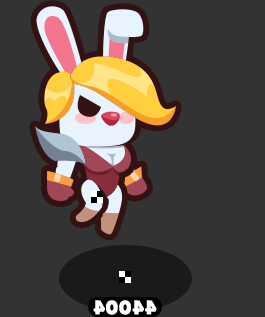
<style>
.page{position:relative;width:265px;height:317px;background:#333333}
.page>*{position:absolute;margin:0}
.t1{font:19.9px "LilitaOne";color:#ffffff;font-weight:bold}
</style>
<div class="page">
<p class="t1" style="left:93px;top:300px;width:64px;height:15px;rotate:180deg">44004</p>
</div>
